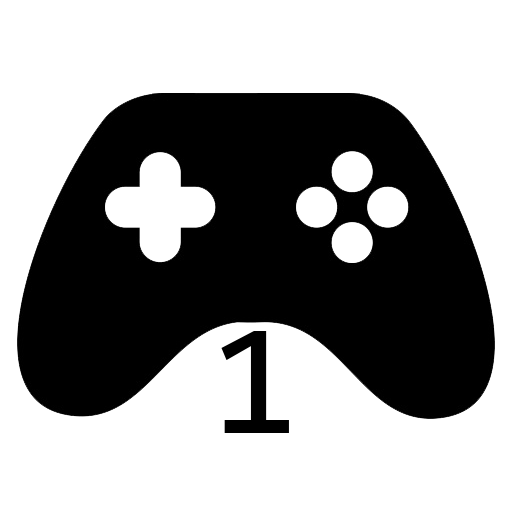
<style>
.page{position:relative;width:512px;height:512px;background:#ffffff}
.page>*{position:absolute;margin:0}
.t1{font:160px "Consolas";color:#000000}
</style>
<div class="page">
<p class="t1" style="left:221px;top:331px;width:68px;height:102px">1</p>
</div>
